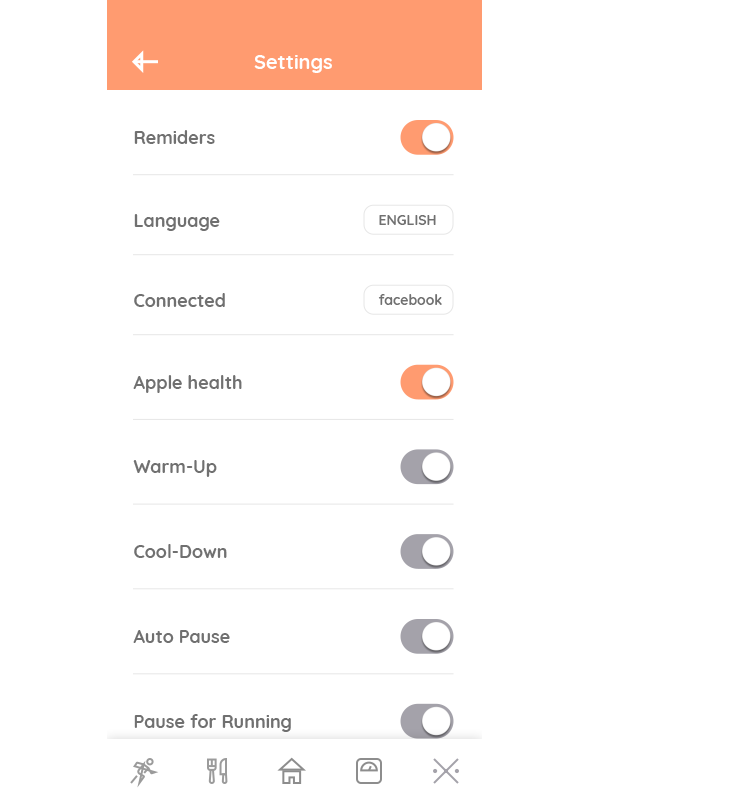
<style>
.page{position:relative;width:743px;height:812px;background:#ffffff}
.page>*{position:absolute;margin:0}
.t1{font:20px "Quicksand-Bold";color:#ffffff}
.t2{font:18px "Quicksand-Bold";color:#707070}
.t3{font:14px "Quicksand-Bold";color:#707070}
</style>
<div class="page">
<p class="t1" style="left:254px;top:55px;width:78px;height:18px">Settings</p>
<p class="t2" style="left:134px;top:130px;width:81px;height:14px">Remiders</p>
<p class="t2" style="left:134px;top:214px;width:86px;height:17px">Language</p>
<p class="t3" style="left:379px;top:215px;width:57px;height:10px">ENGLISH</p>
<p class="t2" style="left:134px;top:293px;width:91px;height:14px">Connected</p>
<p class="t3" style="left:378px;top:294px;width:64px;height:11px">facebook</p>
<p class="t2" style="left:133px;top:375px;width:109px;height:18px">Apple health</p>
<p class="t2" style="left:133px;top:460px;width:84px;height:17px">Warm-Up</p>
<p class="t2" style="left:134px;top:544px;width:93px;height:14px">Cool-Down</p>
<p class="t2" style="left:133px;top:630px;width:97px;height:13px">Auto Pause</p>
<p class="t2" style="left:134px;top:714px;width:157px;height:18px">Pause for Running</p>
</div>
